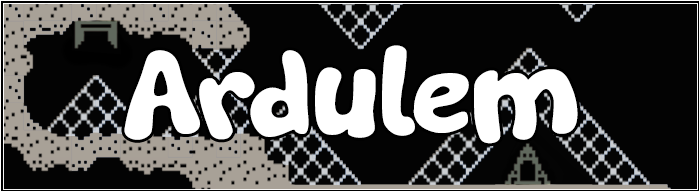
<style>
.page{position:relative;width:700px;height:192px;background:#030303}
.page>*{position:absolute;margin:0}
.t1{font:120px "SoftMarshmallow";color:#ffffff}
</style>
<div class="page">
<p class="t1" style="left:124px;top:45px;width:454px;height:99px">Ardulem</p>
</div>
